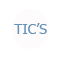
<style>
.page{position:relative;width:60px;height:60px;background:#ffffff}
.page>*{position:absolute;margin:0}
.t1{font:14px "Tahoma";color:#6492b9}
</style>
<div class="page">
<p class="t1" style="left:14px;top:23px;width:33px;height:11px">TIC’S</p>
</div>
